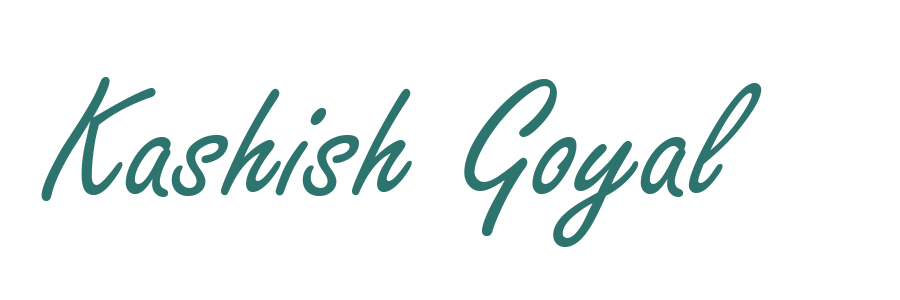
<style>
.page{position:relative;width:900px;height:300px;background:#ffffff}
.page>*{position:absolute;margin:0}
.t1{font:179.3px "FreestyleScript-Regular";color:#2e746e;scale:1.04 1}
</style>
<div class="page">
<p class="t1" style="left:41px;top:77px;width:721px;height:170px">Kashish Goyal</p>
</div>
